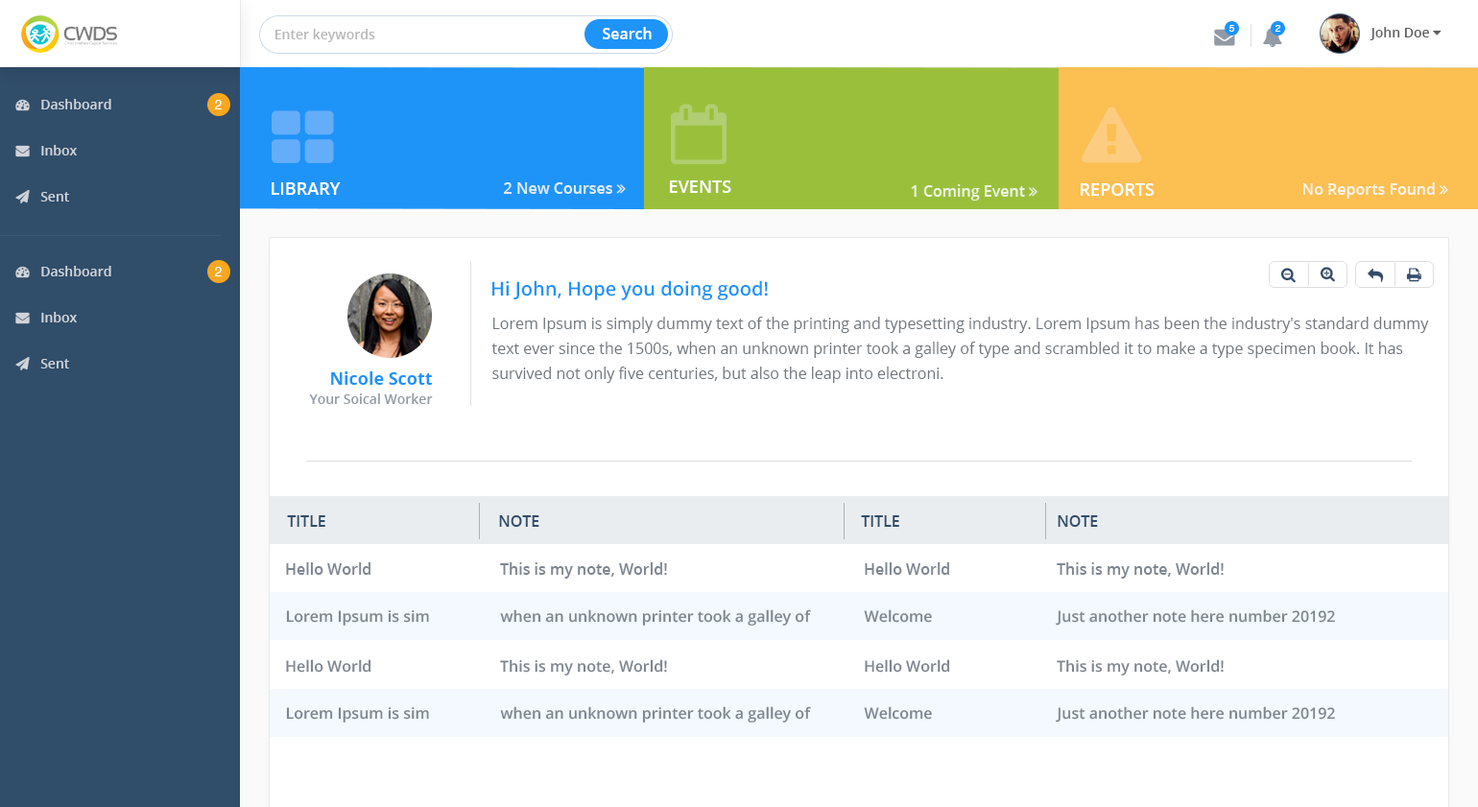
<style>
.page{position:relative;width:1478px;height:807px;background:#ffffff}
.page>*{position:absolute;margin:0}
.t1{font:13.4px "OpenSans-Semibold";color:#b8b8b8}
.t2{font:15.4px "OpenSans-Semibold";color:#ffffff}
.t3{font:9.7px "Helvetica";color:#ffffff}
.t4{font:9.6px "Helvetica";color:#ffffff}
.t5{font:13.4px "Helvetica";color:#ffffff}
.t6{font:17.3px "OpenSans-Semibold";color:#ffffff;text-transform:uppercase}
.t7{font:19.2px "OpenSans-Semibold";color:#1e94f8}
.t8{font:15.4px/24.9px "OpenSans";color:#70767d}
.t9{font:17.3px "OpenSans-Bold";color:#1e94f8}
.t10{font:13.4px "OpenSans-Semibold";color:#919aa5}
.t11{font:15.4px "OpenSans-Semibold";color:#304d6a;text-transform:uppercase}
.t12{font:15.4px "OpenSans-Semibold";color:#7e8690}
</style>
<div class="page">
<p class="t1" style="left:274px;top:29px;width:101px;height:13px">Enter keywords</p>
<p class="t2" style="left:603px;top:27px;width:49px;height:12px">Search</p>
<p class="t3" style="left:1228px;top:25px;width:6px;height:7px">5</p>
<p class="t4" style="left:1274px;top:25px;width:6px;height:7px">2</p>
<p class="t5" style="left:214px;top:100px;width:8px;height:9px">2</p>
<p class="t6" style="left:272px;top:182px;width:69px;height:13px">Library</p>
<p class="t6" style="left:670px;top:180px;width:61px;height:13px">Events</p>
<p class="t6" style="left:1080px;top:183px;width:74px;height:13px">Reports</p>
<p class="t5" style="left:214px;top:267px;width:8px;height:9px">2</p>
<p class="t7" style="left:492px;top:280px;width:276px;height:20px">Hi John, Hope you doing good!</p>
<p class="t8" style="left:491px;top:317px;width:938px;height:66px">Lorem Ipsum is simply dummy text of the printing and typesetting industry. Lorem Ipsum has been the industry's standard dummy text ever since the 1500s, when an unknown printer took a galley of type and scrambled it to make a type specimen book. It has survived not only five centuries, but also the leap into electroni.</p>
<p class="t9" style="left:331px;top:371px;width:101px;height:14px">Nicole Scott</p>
<p class="t10" style="left:309px;top:393px;width:124px;height:11px">Your Soical Worker</p>
<p class="t11" style="left:287px;top:515px;width:38px;height:12px">Title</p>
<p class="t11" style="left:499px;top:515px;width:40px;height:12px">Note</p>
<p class="t11" style="left:861px;top:515px;width:38px;height:12px">Title</p>
<p class="t11" style="left:1057px;top:515px;width:41px;height:12px">Note</p>
<p class="t12" style="left:286px;top:562px;width:84px;height:13px">Hello World</p>
<p class="t12" style="left:500px;top:562px;width:167px;height:17px">This is my note, World!</p>
<p class="t12" style="left:865px;top:562px;width:84px;height:13px">Hello World</p>
<p class="t12" style="left:1056px;top:562px;width:167px;height:17px">This is my note, World!</p>
<p class="t12" style="left:286px;top:610px;width:143px;height:16px">Lorem Ipsum is sim</p>
<p class="t12" style="left:500px;top:609px;width:311px;height:17px">when an unknown printer took a galley of</p>
<p class="t12" style="left:864px;top:609px;width:68px;height:14px">Welcome</p>
<p class="t12" style="left:1055px;top:609px;width:280px;height:17px">Just another note here number 20192</p>
<p class="t12" style="left:286px;top:659px;width:85px;height:14px">Hello World</p>
<p class="t12" style="left:500px;top:659px;width:167px;height:17px">This is my note, World!</p>
<p class="t12" style="left:865px;top:659px;width:85px;height:14px">Hello World</p>
<p class="t12" style="left:1056px;top:659px;width:167px;height:17px">This is my note, World!</p>
<p class="t12" style="left:286px;top:707px;width:143px;height:16px">Lorem Ipsum is sim</p>
<p class="t12" style="left:500px;top:706px;width:311px;height:17px">when an unknown printer took a galley of</p>
<p class="t12" style="left:864px;top:706px;width:68px;height:14px">Welcome</p>
<p class="t12" style="left:1055px;top:706px;width:280px;height:17px">Just another note here number 20192</p>
</div>
